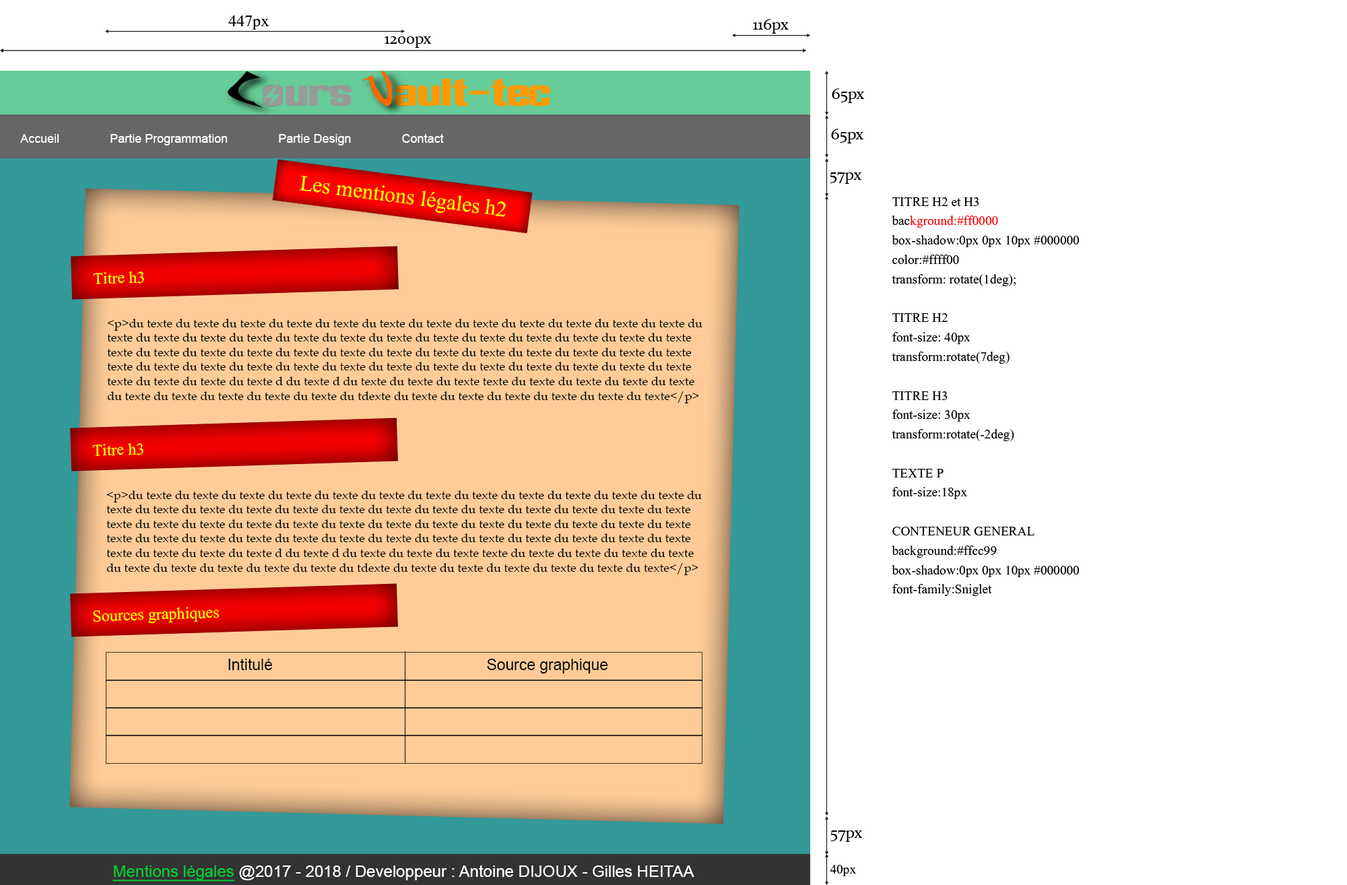
<style>
.page{position:relative;width:1347px;height:885px;background:#ffffff}
.page>*{position:absolute;margin:0}
.t1{font:20.2px "Aparajita";color:#000000}
.t2{font:16.2px "Constantia";color:#000000}
.t3{font:12.1px "ArialMT";color:#ffffff}
.t4{font:26.9px "Aparajita";color:#ffff00}
.t5{font:16.2px "Aparajita";color:#000000}
.t6{font:16.2px "Aparajita";color:#ff0000}
.t7{font:20.2px "Aparajita";color:#ffff00}
.t8{font:12.1px "BookAntiqua";color:#000000}
.t9{font:15.4px "ArialMT";color:#000000}
.t10{font:16.2px "ArialMT";color:#ffffff}
.t11{font:16.2px "ArialMT";color:#00cc33;text-decoration:underline}
</style>
<div class="page">
<p class="t1" style="left:228px;top:15px;width:41px;height:15px">447px</p>
<p class="t2" style="left:753px;top:19px;width:36px;height:15px">116px</p>
<p class="t2" style="left:385px;top:36px;width:46px;height:12px">1200px</p>
<p class="t2" style="left:832px;top:88px;width:32px;height:15px">65px</p>
<p class="t3" style="left:20px;top:134px;width:424px;height:11px">Accueil               Partie Programmation               Partie Design               Contact</p>
<p class="t2" style="left:831px;top:129px;width:33px;height:14px">65px</p>
<p class="t2" style="left:830px;top:172px;width:32px;height:12px">57px</p>
<p class="t4" style="left:299px;top:176px;width:207px;height:41px;rotate:7deg">Les mentions légales h2</p>
<p class="t5" style="left:892px;top:197px;width:188px;height:399px">TITRE H2 et H3<br>bac<span class="t6">kground:#ff0000<br></span>box-shadow:0px 0px 10px #000000<br>color:#ffff00<br>transform: rotate(1deg);<br><br>TITRE H2<br>font-size: 40px<br>transform:rotate(7deg)<br><br>TITRE H3<br>font-size: 30px<br>transform:rotate(-2deg)<br><br>TEXTE P<br>font-size:18px<br><br>CONTENEUR GENERAL<br>background:#ffcc99<br>box-shadow:0px 0px 10px #000000<br>font-family:Sniglet</p>
<p class="t7" style="left:93px;top:271px;width:51px;height:13px;rotate:-2deg">Titre h3</p>
<p class="t8" style="left:107px;top:319px;width:596px;height:84px">&lt;p&gt;du texte du texte du texte du texte du texte du texte du texte du texte du texte du texte du texte du texte du texte du texte du texte du texte du texte du texte du texte du texte du texte du texte du texte du texte du texte texte du texte du texte du texte du texte du texte du texte du texte du texte du texte du texte du texte du texte texte du texte du texte du texte du texte du texte du texte du texte du texte du texte du texte du texte du texte texte du texte du texte du texte d du texte d du texte du texte du texte texte du texte du texte du texte du texte du texte du texte du texte du texte du texte du tdexte du texte du texte du texte du texte du texte du texte&lt;/p&gt;</p>
<p class="t7" style="left:92px;top:443px;width:51px;height:13px;rotate:-2deg">Titre h3</p>
<p class="t8" style="left:106px;top:490px;width:596px;height:85px">&lt;p&gt;du texte du texte du texte du texte du texte du texte du texte du texte du texte du texte du texte du texte du texte du texte du texte du texte du texte du texte du texte du texte du texte du texte du texte du texte du texte texte du texte du texte du texte du texte du texte du texte du texte du texte du texte du texte du texte du texte texte du texte du texte du texte du texte du texte du texte du texte du texte du texte du texte du texte du texte texte du texte du texte du texte d du texte d du texte du texte du texte texte du texte du texte du texte du texte du texte du texte du texte du texte du texte du tdexte du texte du texte du texte du texte du texte du texte&lt;/p&gt;</p>
<p class="t7" style="left:93px;top:607px;width:126px;height:17px;rotate:-2deg">Sources graphiques</p>
<p class="t9" style="left:228px;top:659px;width:44px;height:11px">Intitulé</p>
<p class="t9" style="left:487px;top:659px;width:121px;height:15px">Source graphique</p>
<p class="t2" style="left:831px;top:831px;width:31px;height:11px">57px</p>
<p class="t10" style="left:112px;top:865px;width:582px;height:17px"><span class="t11">Mentions légales</span> @2017 - 2018 / Developpeur : Antoine DIJOUX - Gilles HEITAA</p>
<p class="t5" style="left:830px;top:865px;width:26px;height:11px">40px</p>
</div>
